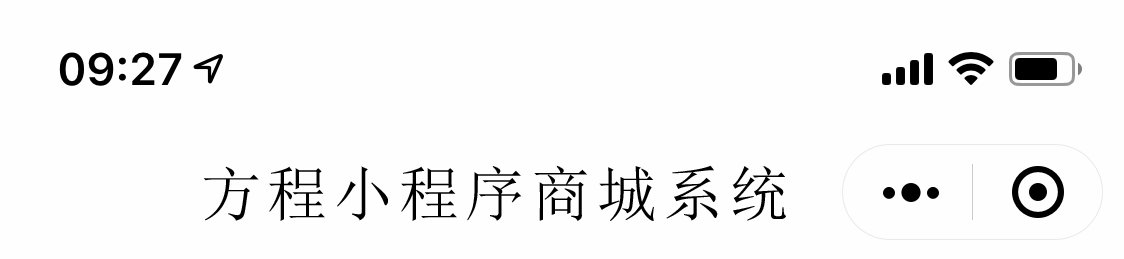
<style>
.page{position:relative;width:1124px;height:259px;background:#fefefe}
.page>*{position:absolute;margin:0}
.t1{font:60px "SimSun";letter-spacing:0.1em;color:#000000}
</style>
<div class="page">
<p class="t1" style="left:203px;top:165px;width:583px;height:56px">方程小程序商城系统</p>
</div>
